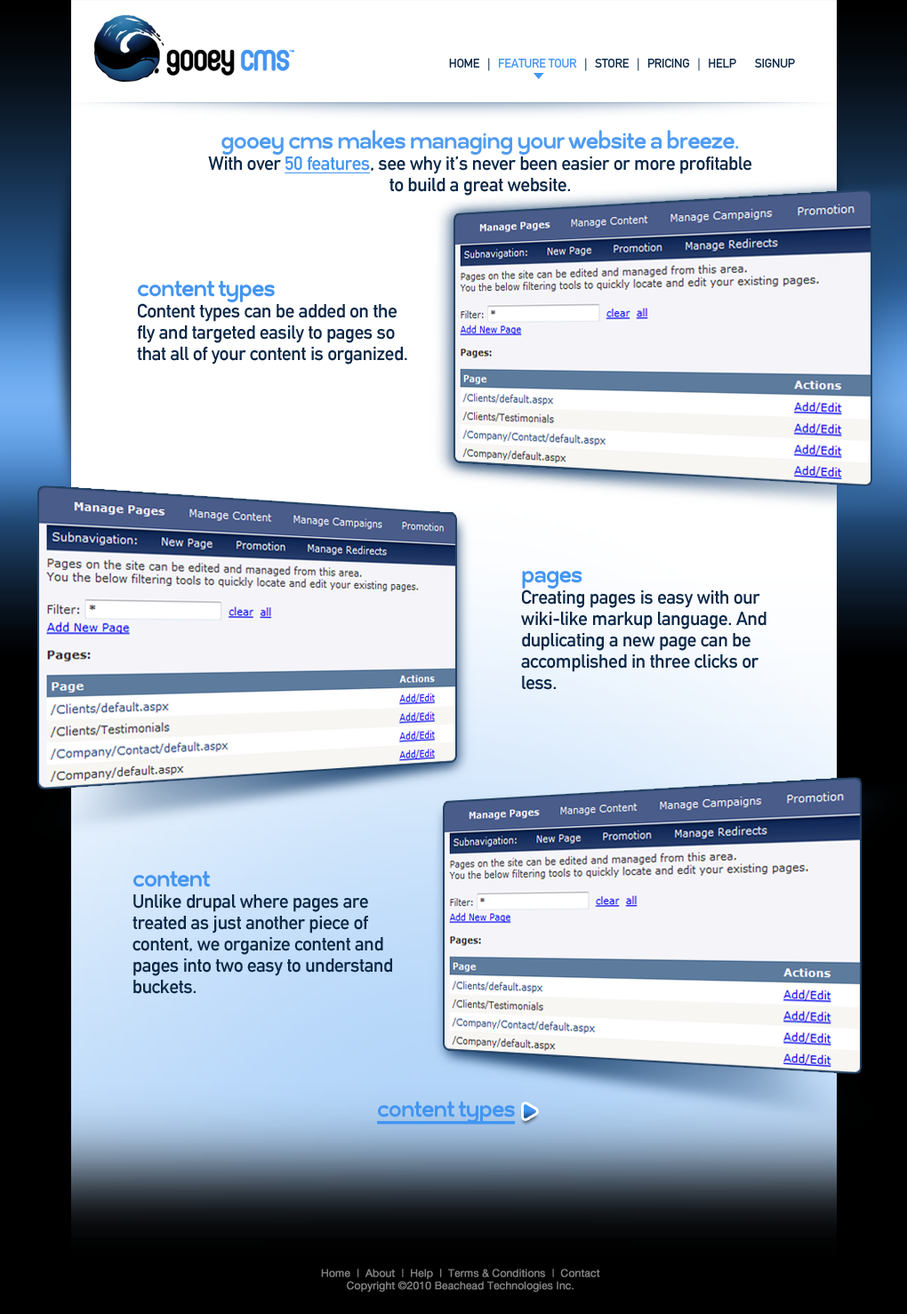
<style>
.page{position:relative;width:907px;height:1314px;background:#ffffff}
.page>*{position:absolute;margin:0}
.t1{font:12.5px "DINMittelschrift";letter-spacing:-0.025em;color:#0c2847}
.t2{font:12.5px "DINMittelschrift";letter-spacing:-0.025em;color:#4395f1}
.t3{font:18.7px/21.3px "DINMittelschrift";letter-spacing:-0.01em;color:#0c2847}
.t4{font:27.6px/39.1px "EstiloText-Bold";letter-spacing:-0.025em;color:#509cf2}
.t5{font:18.7px/21.3px "DINMittelschrift";letter-spacing:-0.01em;color:#4395f1;text-decoration:underline}
.t6{font:27.6px/24.9px "EstiloText-Bold";letter-spacing:-0.025em;color:#4395f1}
.t7{font:27.6px/39.1px "EstiloText-Bold";letter-spacing:-0.025em;color:#4395f1}
.t8{font:27.6px "EstiloText-Bold";letter-spacing:-0.025em;color:#4395f1;text-decoration:underline}
.t9{font:10.7px "HelveticaNeue-Roman";letter-spacing:-0.01em;color:#828282;font-weight:bold}
</style>
<div class="page">
<p class="t1" style="left:449px;top:58px;width:346px;height:13px">HOME   |   <span class="t2">FEATURE TOUR</span>   |   STORE   |   PRICING   |   HELP       SIGNUP</p>
<p class="t3" style="left:208px;top:130px;width:544px;height:66px;text-align:center"><span class="t4">gooey cms makes managing your website a breeze.<br></span>With over <span class="t5">50 features</span>, see why it’s never been easier or more profitable<br>to build a great website.</p>
<p class="t3" style="left:137px;top:280px;width:270px;height:85px"><span class="t6">content types<br></span>Content types can be added on the fly and targeted easily to pages so that all of your content is organized.</p>
<p class="t3" style="left:521px;top:571px;width:246px;height:119px"><span class="t7">pages<br></span>Creating pages is easy with our wiki-like markup language. And duplicating a new page can be accomplished in three clicks or less.</p>
<p class="t3" style="left:133px;top:871px;width:259px;height:123px"><span class="t7">content<br></span>Unlike drupal where pages are treated as just another piece of content, we organize content and pages into two easy to understand buckets.</p>
<p class="t8" style="left:377px;top:1101px;width:139px;height:22px">content types</p>
<p class="t9" style="left:321px;top:1269px;width:279px;height:23px;text-align:center">Home  |  About  |  Help  |  Terms &amp; Conditions  |  Contact<br>Copyright ©2010 Beachead Technologies Inc.</p>
</div>
